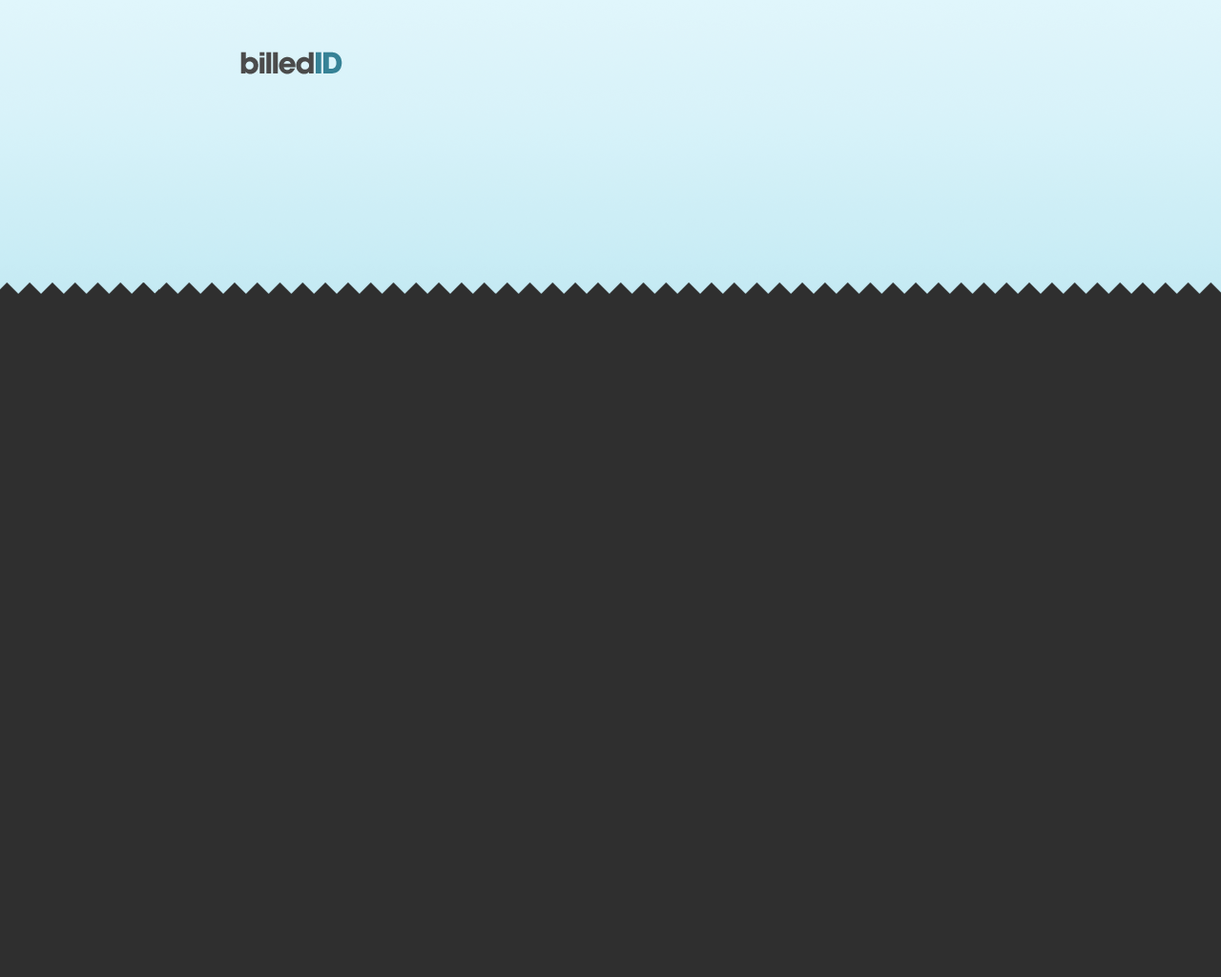
<style>
.page{position:relative;width:1221px;height:977px;background:#2f2f2f}
.page>*{position:absolute;margin:0}
.t1{font:28.6px "ITCAvantGardeStd-Bold";letter-spacing:-0.05em;color:#4b4b4b}
.t2{font:28.6px "ITCAvantGardeStd-Bold";letter-spacing:-0.05em;color:#368296}
</style>
<div class="page">
<p class="t1" style="left:240px;top:52px;width:102px;height:22px">billed<span class="t2">ID</span></p>
</div>
